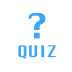
<style>
.page{position:relative;width:72px;height:72px;background:#ffffff}
.page>*{position:absolute;margin:0}
.t1{font:34px "Silom";color:#3ba7fa}
.t2{font:16px "Silom";color:#3ba7fa}
</style>
<div class="page">
<p class="t1" style="left:28px;top:13px;width:18px;height:26px">?</p>
<p class="t2" style="left:18px;top:45px;width:38px;height:14px">QUIZ</p>
</div>
